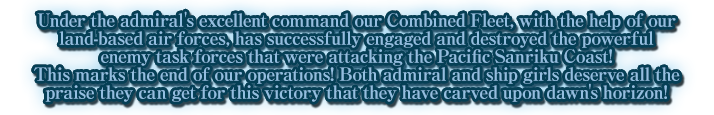
<style>
.page{position:relative;width:714px;height:115px;background:#053f55}
.page>*{position:absolute;margin:0}
.t1{font:18px/18px "RyuminPro-ExBold";letter-spacing:-0.04em;color:#93bee0}
</style>
<div class="page">
<p class="t1" style="left:34px;top:11px;width:646px;height:91px;text-align:center">Under the admiral's excellent command our Combined Fleet, with the help of our<br>land-based air forces, has successfully engaged and destroyed the powerful<br>enemy task forces that were attacking the Pacific Sanriku Coast!<br>This marks the end of our operations! Both admiral and ship girls deserve all the<br>praise they can get for this victory that they have carved upon dawn's horizon!</p>
</div>
